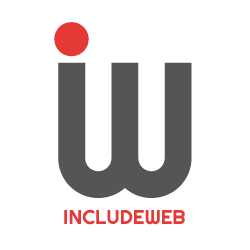
<style>
.page{position:relative;width:250px;height:250px;background:#ffffff}
.page>*{position:absolute;margin:0}
.t1{font:190px "Righteous-Regular";color:#555555}
.t2{font:20px "Righteous-Regular";color:#e53935}
</style>
<div class="page">
<p class="t1" style="left:58px;top:62px;width:134px;height:136px">W</p>
<p class="t2" style="left:64px;top:209px;width:121px;height:16px">INCLUDEWEB</p>
</div>
